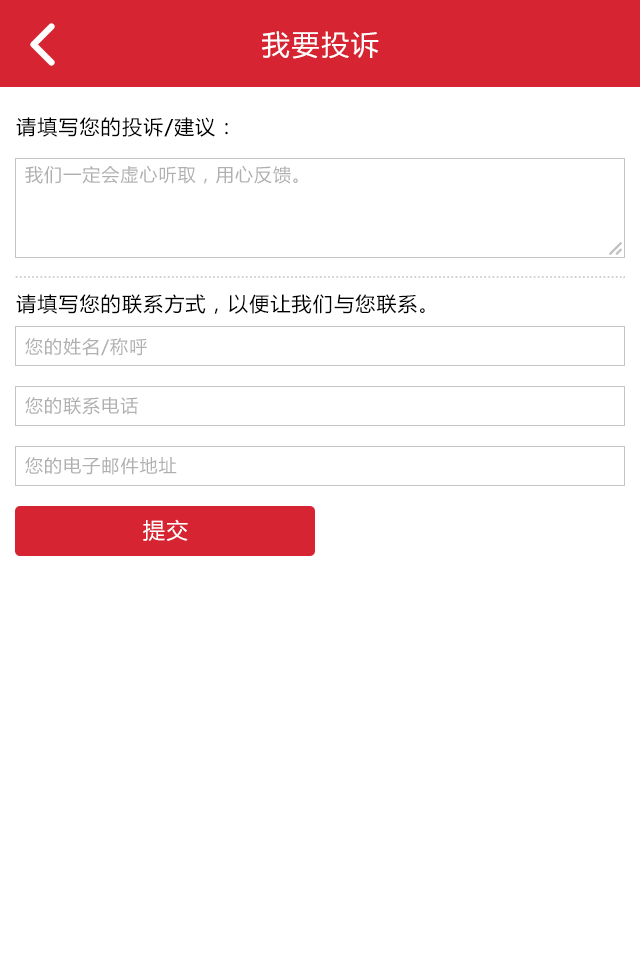
<style>
.page{position:relative;width:640px;height:960px;background:#ffffff}
.page>*{position:absolute;margin:0}
.t1{font:28px "MicrosoftYaHei";letter-spacing:0.06em;color:#ffffff}
.t2{font:20px "MicrosoftYaHei";letter-spacing:0.06em;color:#000000}
.t3{font:18px "MicrosoftYaHei";letter-spacing:0.06em;color:#b0b0b0}
.t4{font:22px "MicrosoftYaHei";letter-spacing:0.06em;color:#ffffff}
</style>
<div class="page">
<p class="t1" style="left:262px;top:31px;width:117px;height:28px">我要投诉</p>
<p class="t2" style="left:16px;top:117px;width:212px;height:20px">请填写您的投诉/建议：</p>
<p class="t3" style="left:25px;top:165px;width:273px;height:19px">我们一定会虚心听取，用心反馈。</p>
<p class="t2" style="left:16px;top:294px;width:409px;height:20px">请填写您的联系方式，以便让我们与您联系。</p>
<p class="t3" style="left:25px;top:337px;width:122px;height:19px">您的姓名/称呼</p>
<p class="t3" style="left:25px;top:397px;width:113px;height:18px">您的联系电话</p>
<p class="t3" style="left:25px;top:457px;width:152px;height:18px">您的电子邮件地址</p>
<p class="t4" style="left:143px;top:519px;width:45px;height:22px">提交</p>
</div>
